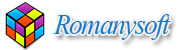
<style>
.page{position:relative;width:180px;height:50px;background:#ffffff}
.page>*{position:absolute;margin:0}
.t1{font:36px "Kokila-Italic";letter-spacing:-0.05em;color:#0f7bce}
</style>
<div class="page">
<p class="t1" style="left:53px;top:14px;width:118px;height:26px">Romanysoft</p>
</div>
